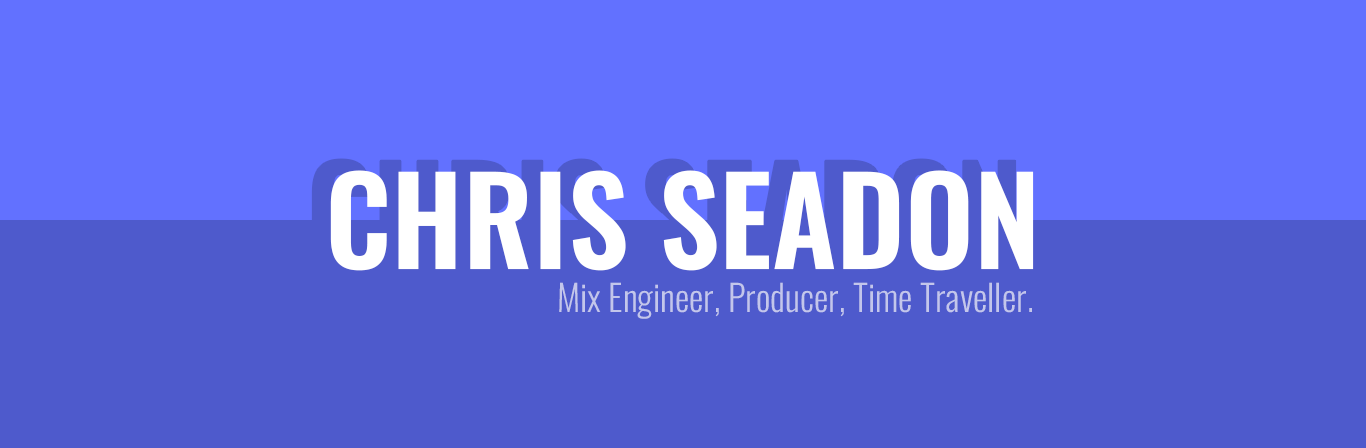
<style>
.page{position:relative;width:1366px;height:448px;background:#4e5acc}
.page>*{position:absolute;margin:0}
.t1{font:120px "Oswald-SemiBold";color:#ffffff}
.t2{font:36px "Oswald-Light";color:#c3c6eb}
</style>
<div class="page">
<p class="t1" style="left:330px;top:170px;width:704px;height:101px">CHRIS SEADON</p>
<p class="t2" style="left:559px;top:282px;width:473px;height:37px">Mix Engineer, Producer, Time Traveller.</p>
</div>
